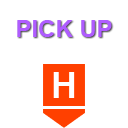
<style>
.page{position:relative;width:128px;height:128px;background:#ffffff}
.page>*{position:absolute;margin:0}
.t1{font:24px "Arial-BoldMT";color:#af5cff}
.t2{font:36px "Arial-BoldMT";color:#ffffff}
</style>
<div class="page">
<p class="t1" style="left:17px;top:20px;width:95px;height:17px">PICK UP</p>
<p class="t2" style="left:53px;top:72px;width:22px;height:26px">H</p>
</div>
